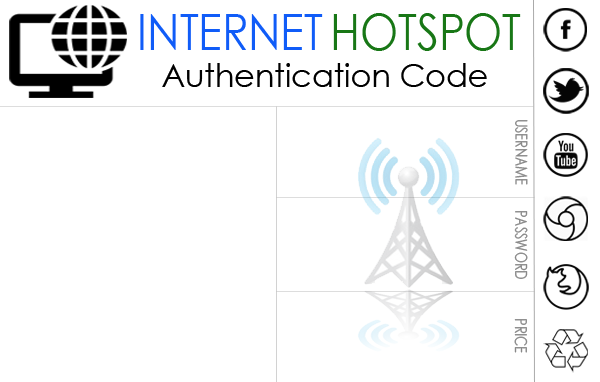
<style>
.page{position:relative;width:600px;height:382px;background:#ffffff}
.page>*{position:absolute;margin:0}
.t1{font:49.8px "CenturyGothic";color:#105cf8;scale:0.88 1}
.t2{font:49.8px "CenturyGothic";color:#187716;scale:0.88 1}
.t3{font:32.2px "CenturyGothic";color:#000000}
.t4{font:16.2px "CenturyGothic";color:#888888;scale:0.78 1}
</style>
<div class="page">
<p class="t1" style="left:140px;top:14px;width:183px;height:36px">INTERNET</p>
<p class="t2" style="left:333px;top:13px;width:188px;height:38px">HOTSPOT</p>
<p class="t3" style="left:162px;top:63px;width:325px;height:24px">Authentication Code</p>
<p class="t4" style="left:515px;top:120px;width:13px;height:65px;rotate:90deg">USERNAME</p>
<p class="t4" style="left:514px;top:211px;width:14px;height:68px;rotate:90deg">PASSWORD</p>
<p class="t4" style="left:514px;top:319px;width:14px;height:34px;rotate:90deg">PRICE</p>
</div>
